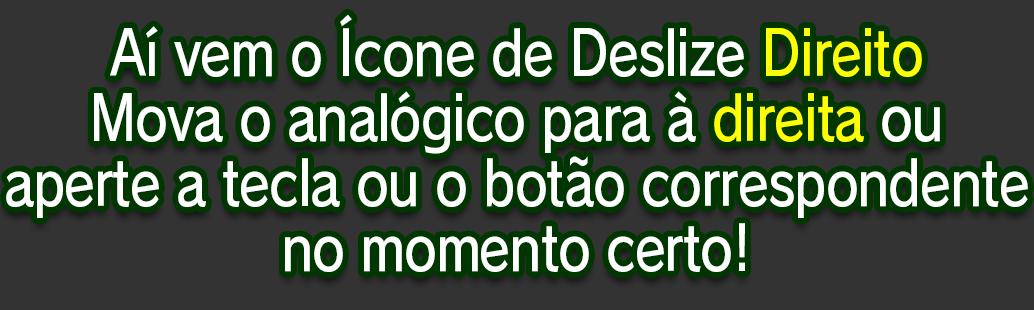
<style>
.page{position:relative;width:1034px;height:310px;background:#333333}
.page>*{position:absolute;margin:0}
.t1{font:61.3px/65.2px "RodinPro-DB";letter-spacing:-0.022em;color:#ffffff;scale:0.84 1}
.t2{font:61.3px/65.2px "RodinPro-DB";letter-spacing:-0.022em;color:#fcff05;scale:0.84 1}
</style>
<div class="page">
<p class="t1" style="left:6px;top:14px;width:1022px;height:258px;text-align:center">Aí vem o Ícone de Deslize <span class="t2">Direito<br></span>Mova o analógico para à <span class="t2">direita</span> ou<br>aperte a tecla ou o botão correspondente<br>no momento certo!</p>
</div>
